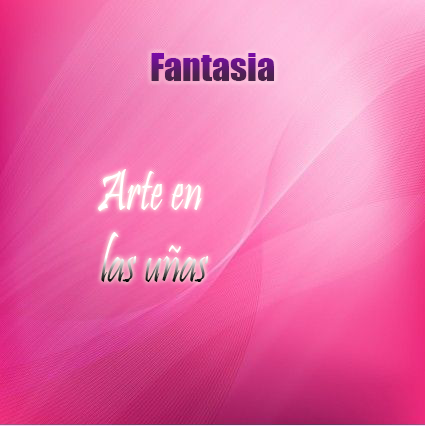
<style>
.page{position:relative;width:425px;height:426px}
.page>*{position:absolute;margin:0}
.t1{font:36px "Impact"}
.t2{font:59.9px "Pristina-Regular";scale:0.73 1}
</style>
<div class="page">
<p class="t1" style="left:151px;top:53px;width:123px;height:28px">Fantasia</p>
<p class="t2" style="left:98px;top:169px;width:111px;height:113px;text-align:center">Arte en<br> las uñas</p>
</div>
